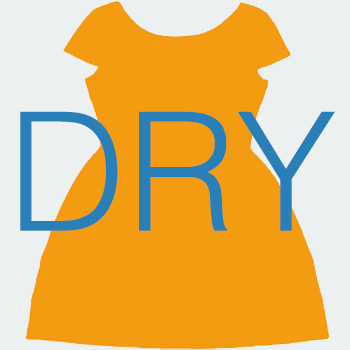
<style>
.page{position:relative;width:350px;height:350px;background:#f39c12}
.page>*{position:absolute;margin:0}
.t1{font:165px "Helvetica-Light";color:#2980b9}
</style>
<div class="page">
<p class="t1" style="left:20px;top:111px;width:315px;height:120px">DRY</p>
</div>
